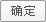
<style>
.page{position:relative;width:46px;height:22px}
.page>*{position:absolute;margin:0}
.t1{font:12px "SimSun";letter-spacing:0.08em;color:#555555}
</style>
<div class="page">
<p class="t1" style="left:11px;top:5px;width:24px;height:11px">确定</p>
</div>
